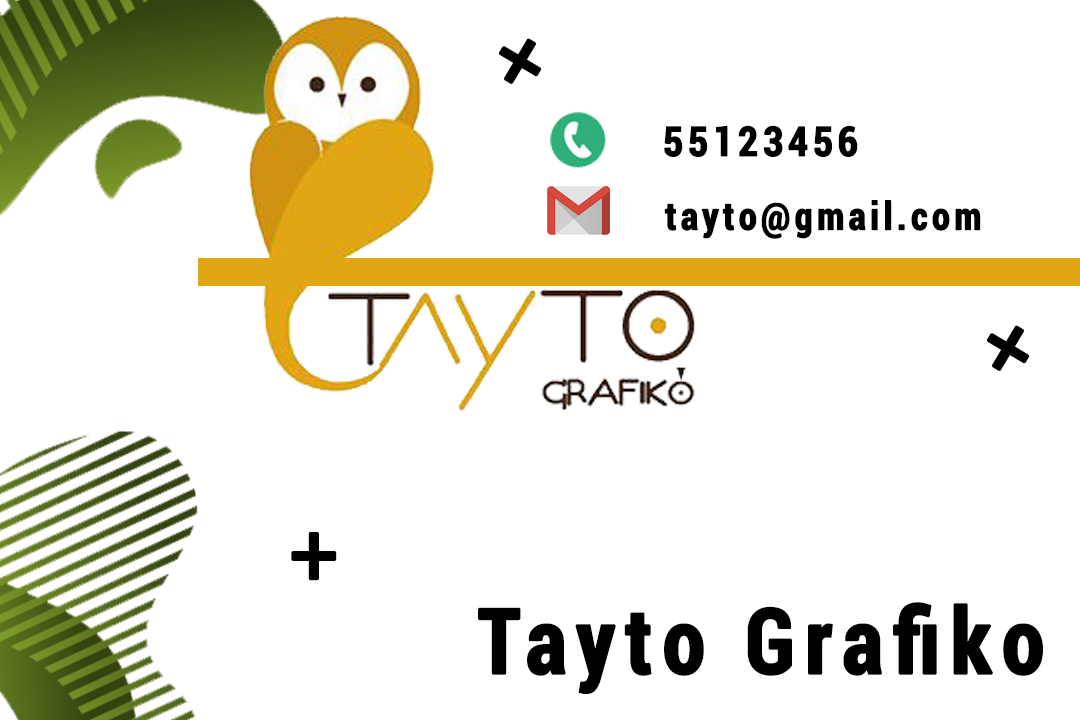
<style>
.page{position:relative;width:1080px;height:720px;background:#ffffff}
.page>*{position:absolute;margin:0}
.t1{font:96.8px "Consolas";letter-spacing:0.1em;color:#000000;font-weight:bold;scale:0.93 1}
.t2{font:40.8px "Roboto-BoldCondensed";letter-spacing:0.1em;color:#000000;font-weight:bold;scale:0.94 1}
.t3{font:38.2px "Roboto-BoldCondensed";letter-spacing:0.1em;color:#000000;font-weight:bold;scale:0.95 1}
.t4{font:90.5px "Roboto-BoldCondensed";letter-spacing:0.1em;color:#000000;font-weight:bold;scale:0.94 1}
</style>
<div class="page">
<p class="t1" style="left:498px;top:38px;width:44px;height:46px;rotate:31deg">+</p>
<p class="t2" style="left:664px;top:125px;width:194px;height:32px">55123456</p>
<p class="t3" style="left:664px;top:200px;width:317px;height:39px">tayto@gmail.com</p>
<p class="t1" style="left:986px;top:325px;width:44px;height:46px;rotate:31deg">+</p>
<p class="t1" style="left:291px;top:532px;width:46px;height:49px">+</p>
<p class="t4" style="left:478px;top:602px;width:565px;height:92px">Tayto Grafiko</p>
</div>
